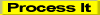
<style>
.page{position:relative;width:100px;height:15px;background:#fffc00}
.page>*{position:absolute;margin:0}
.t1{font:12.6px "Arial-BoldMT";letter-spacing:-0.05em;color:#000000;scale:1.55 1}
</style>
<div class="page">
<p class="t1" style="left:8px;top:3px;width:83px;height:9px">Process It</p>
</div>
